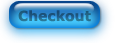
<style>
.page{position:relative;width:115px;height:43px}
.page>*{position:absolute;margin:0}
.t1{font:14px "Verdana-Bold";color:#23648a}
</style>
<div class="page">
<p class="t1" style="left:18px;top:10px;width:73px;height:12px">Checkout</p>
</div>
